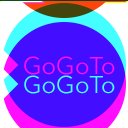
<style>
.page{position:relative;width:128px;height:128px;background:#430dff}
.page>*{position:absolute;margin:0}
.t1{font:24px "AvenirNext-Regular"}
</style>
<div class="page">
<p class="t1" style="left:24px;top:55px;width:91px;height:19px">GoGoTo</p>
</div>
